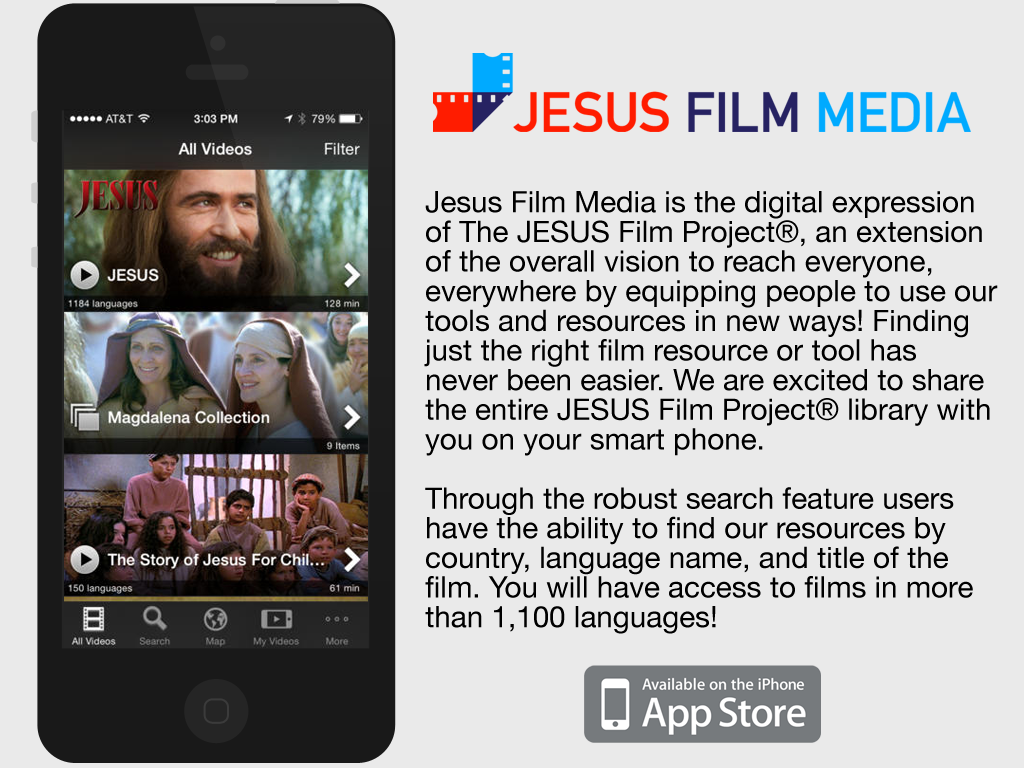
<style>
.page{position:relative;width:1024px;height:768px;background:#eaeaea}
.page>*{position:absolute;margin:0}
.t1{font:29.6px/29.6px "HelveticaNeue";color:#000000}
</style>
<div class="page">
<p class="t1" style="left:424px;top:191px;width:574px;height:443px">Jesus Film Media is the digital expression of The JESUS Film Project®, an extension of the overall vision to reach everyone, everywhere by equipping people to use our tools and resources in new ways! Finding just the right film resource or tool has never been easier. We are excited to share the entire JESUS Film Project® library with you on your smart phone.<br><br>Through the robust search feature users have the ability to find our resources by country, language name, and title of the film. You will have access to films in more than 1,100 languages!</p>
</div>
